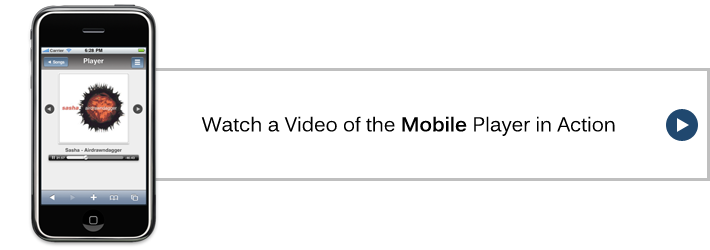
<style>
.page{position:relative;width:710px;height:250px;background:#ffffff}
.page>*{position:absolute;margin:0}
.t1{font:19.7px "Kalinga";color:#000000}
.t2{font:19.7px "Kalinga-Bold";color:#000000}
</style>
<div class="page">
<p class="t1" style="left:201px;top:116px;width:414px;height:20px">Watch a Video of the <span class="t2">Mobile</span> Player in Action</p>
</div>
